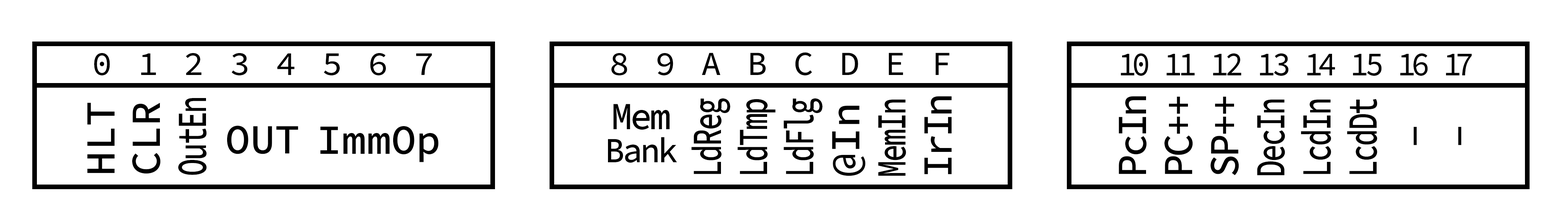
<style>
.page{position:relative;width:1568px;height:223px;background:#ffffff}
.page>*{position:absolute;margin:0}
.t1{font:33.8px "SourceCodeRoman_448.000wght";color:#000000}
.t2{font:33.8px "SourceCodeRoman_448.000wght";letter-spacing:-0.08em;color:#000000;scale:0.91 1}
.t3{font:41.5px/45.3px "SourceCodeRoman_499.000wght";color:#000000}
.t4{font:41.5px "SourceCodeRoman_499.000wght";color:#000000}
.t5{font:41.5px/44.6px "SourceCodeRoman_499.000wght";color:#000000}
.t6{font:41.5px/45.3px "SourceCodeRoman_499.000wght";letter-spacing:-0.06em;color:#000000;scale:0.7 1}
.t7{font:41.5px/46.1px "SourceCodeRoman_499.000wght";letter-spacing:-0.06em;color:#000000;scale:0.7 1}
.t8{font:41.5px/46.1px "SourceCodeRoman_499.000wght";color:#000000}
.t9{font:41.5px/46.1px "SourceCodeRoman_499.000wght";letter-spacing:-0.08em;color:#000000;scale:0.94 1}
.t10{font:41.5px/45.3px "SourceCodeRoman_499.000wght";letter-spacing:-0.08em;color:#000000;scale:0.94 1}
.t11{font:35.4px/33.1px "SourceCodeRoman_499.000wght";letter-spacing:-0.06em;color:#000000;scale:0.93 1}
.t12{font:38.4px/33.1px "SourceCodeRoman_499.000wght";letter-spacing:-0.06em;color:#000000;scale:0.93 1}
</style>
<div class="page">
<p class="t1" style="left:94px;top:53px;width:338px;height:22px">0 1 2 3 4 5 6 7</p>
<p class="t1" style="left:611px;top:52px;width:339px;height:23px">8 9 A B C D E F</p>
<p class="t2" style="left:1121px;top:53px;width:351px;height:23px">10 11 12 13 14 15 16 17</p>
<p class="t3" style="left:87px;top:98px;width:120px;height:77px;rotate:-90deg"><span class="t4">H</span><span class="t5">L</span>T<br>CLR<br><span class="t6">Ou</span><span class="t7">tEn</span></p>
<p class="t7" style="left:691px;top:96px;width:261px;height:80px;rotate:-90deg">LdReg<br>LdTmp<br>LdFlg<br><span class="t8">@In<br></span>MemIn<br><span class="t9">IrIn</span></p>
<p class="t7" style="left:1119px;top:96px;width:258px;height:79px;rotate:-90deg"><span class="t9">P</span><span class="t10">cIn<br></span><span class="t9">PC++<br>SP++<br></span>DecIn<br>LcdIn<br>LcdDt</p>
<p class="t11" style="left:608px;top:104px;width:69px;height:59px;text-align:center"><span class="t12">Mem<br></span>Bank</p>
<p class="t4" style="left:227px;top:125px;width:71px;height:29px">OUT</p>
<p class="t4" style="left:320px;top:126px;width:119px;height:36px">ImmOp</p>
<p class="t5" style="left:1414px;top:126px;width:48px;height:19px;rotate:-90deg">-<br>-</p>
</div>
